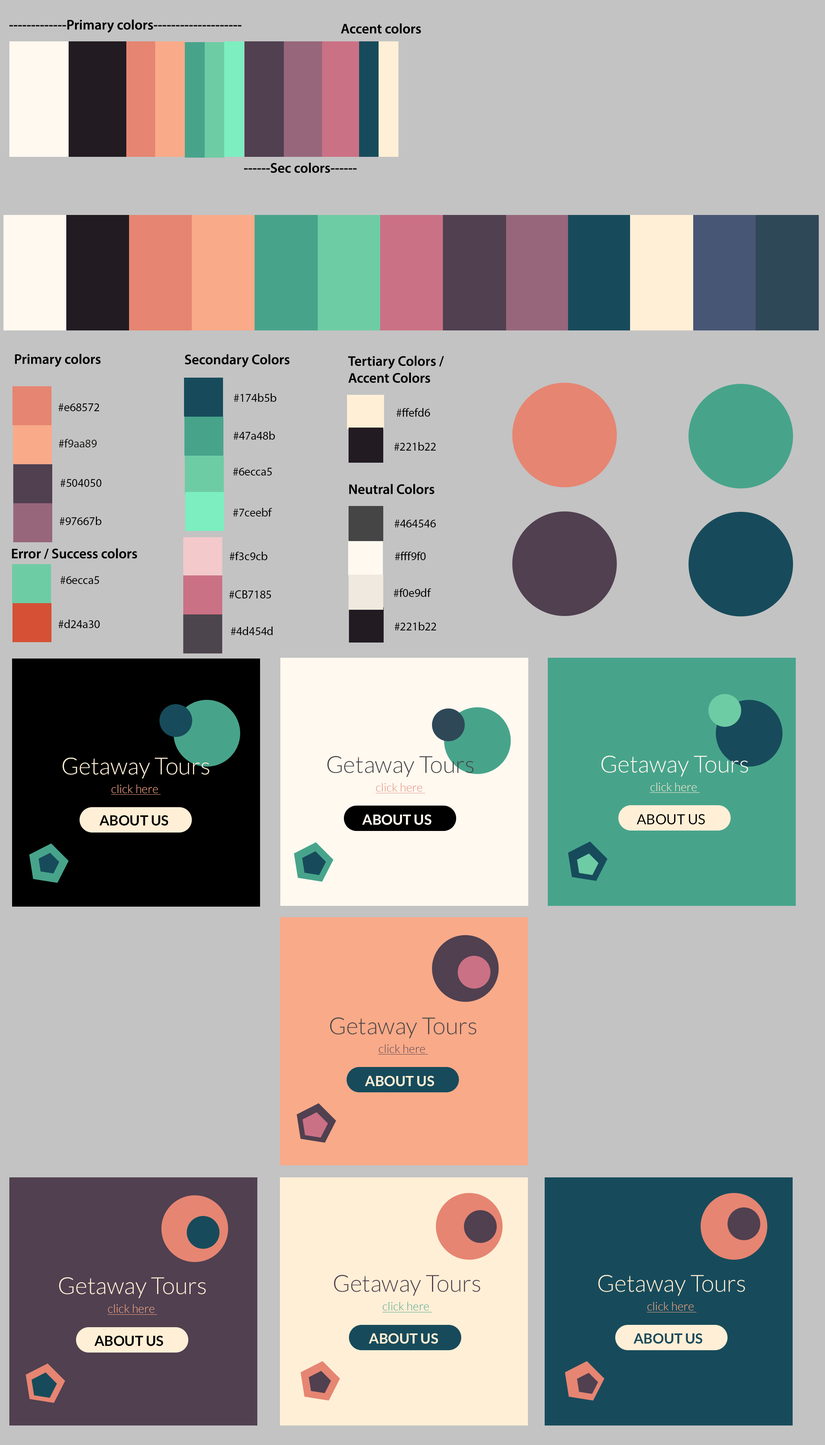
<style>
.page{position:relative;width:825px;height:1445px;background:#c3c3c3}
.page>*{position:absolute;margin:0}
.t1{font:14px "MyriadPro-Semibold";color:#000000}
.t2{font:11.7px "MyriadPro-Regular";color:#000000}
.t3{font:11.7px "MyriadPro-Regular";color:#181716}
.t4{font:11.7px "MyriadPro-Regular";color:#0c0c0a}
.t5{font:23.4px "Lato-Light";color:#ffefd6}
.t6{font:23.4px "Lato-Light";color:#464546}
.t7{font:23.4px "Lato-Light";color:#fff9f0}
.t8{font:11.7px "Lato-Light";color:#f9aa89;text-decoration:underline}
.t9{font:11.7px "Lato-Light";color:#e68572;text-decoration:underline}
.t10{font:11.7px "Lato-Light";color:#ffefd6;text-decoration:underline}
.t11{font:14px "Lato-Bold";color:#000000}
.t12{font:14px "Lato-Bold";color:#fff9f0}
.t13{font:14px "Lato-Regular";color:#000000}
.t14{font:11.7px "Lato-Light";color:#504050;text-decoration:underline}
.t15{font:14px "Lato-Bold";color:#ffefd6}
.t16{font:23.4px "Lato-Light";color:#504050}
.t17{font:11.7px "Lato-Light";color:#47a48b;text-decoration:underline}
.t18{font:14px "Lato-Bold";color:#174b5b}
</style>
<div class="page">
<p class="t1" style="left:9px;top:20px;width:233px;height:13px">-------------Primary colors--------------------</p>
<p class="t1" style="left:341px;top:23px;width:80px;height:11px">Accent colors</p>
<p class="t1" style="left:244px;top:163px;width:113px;height:10px">------Sec colors------</p>
<p class="t1" style="left:15px;top:354px;width:86px;height:13px">Primary colors</p>
<p class="t1" style="left:185px;top:354px;width:105px;height:13px">Secondary Colors</p>
<p class="t1" style="left:348px;top:356px;width:96px;height:27px">Tertiary Colors / <br>Accent Colors</p>
<p class="t2" style="left:234px;top:393px;width:43px;height:9px">#174b5b</p>
<p class="t2" style="left:59px;top:403px;width:40px;height:8px">#e68572</p>
<p class="t2" style="left:397px;top:408px;width:33px;height:9px">#ffefd6</p>
<p class="t2" style="left:234px;top:431px;width:41px;height:9px">#47a48b</p>
<p class="t3" style="left:59px;top:439px;width:38px;height:8px"><span class="t2">#</span>f9aa89</p>
<p class="t2" style="left:394px;top:442px;width:42px;height:9px">#221b22</p>
<p class="t2" style="left:233px;top:468px;width:39px;height:7px">#6ecca5</p>
<p class="t2" style="left:60px;top:479px;width:41px;height:8px">#504050</p>
<p class="t1" style="left:349px;top:484px;width:86px;height:10px">Neutral Colors</p>
<p class="t4" style="left:233px;top:508px;width:39px;height:8px"><span class="t2">#</span>7ceebf</p>
<p class="t2" style="left:60px;top:516px;width:41px;height:9px">#97667b</p>
<p class="t2" style="left:395px;top:520px;width:41px;height:7px">#464546</p>
<p class="t1" style="left:12px;top:548px;width:125px;height:11px">Error / Success colors</p>
<p class="t2" style="left:230px;top:552px;width:38px;height:8px">#f3c9cb</p>
<p class="t2" style="left:395px;top:552px;width:31px;height:8px">#fff9f0</p>
<p class="t2" style="left:60px;top:576px;width:39px;height:8px">#6ecca5</p>
<p class="t2" style="left:229px;top:590px;width:42px;height:8px">#CB7185</p>
<p class="t2" style="left:394px;top:588px;width:37px;height:9px">#f0e9df</p>
<p class="t2" style="left:59px;top:619px;width:41px;height:9px">#d24a30</p>
<p class="t2" style="left:231px;top:626px;width:42px;height:9px">#4d454d</p>
<p class="t2" style="left:395px;top:622px;width:41px;height:8px">#221b22</p>
<p class="t5" style="left:62px;top:757px;width:147px;height:22px">Getaway Tours</p>
<p class="t6" style="left:327px;top:756px;width:147px;height:21px">Getaway Tours</p>
<p class="t7" style="left:601px;top:756px;width:148px;height:21px">Getaway Tours</p>
<p class="t8" style="left:111px;top:784px;width:50px;height:11px">click here</p>
<p class="t9" style="left:376px;top:783px;width:50px;height:10px">click here</p>
<p class="t10" style="left:650px;top:782px;width:50px;height:11px">click here</p>
<p class="t11" style="left:99px;top:815px;width:70px;height:11px">ABOUT US</p>
<p class="t12" style="left:362px;top:814px;width:70px;height:11px">ABOUT US</p>
<p class="t13" style="left:637px;top:814px;width:68px;height:11px">ABOUT US</p>
<p class="t6" style="left:330px;top:1017px;width:147px;height:21px">Getaway Tours</p>
<p class="t14" style="left:378px;top:1044px;width:50px;height:10px">click here</p>
<p class="t15" style="left:365px;top:1075px;width:70px;height:11px">ABOUT US</p>
<p class="t5" style="left:59px;top:1277px;width:147px;height:21px">Getaway Tours</p>
<p class="t16" style="left:334px;top:1275px;width:147px;height:21px">Getaway Tours</p>
<p class="t5" style="left:598px;top:1275px;width:147px;height:21px">Getaway Tours</p>
<p class="t17" style="left:382px;top:1302px;width:50px;height:10px">click here</p>
<p class="t8" style="left:647px;top:1302px;width:50px;height:10px">click here</p>
<p class="t8" style="left:108px;top:1304px;width:49px;height:10px">click here</p>
<p class="t11" style="left:94px;top:1335px;width:69px;height:11px">ABOUT US</p>
<p class="t15" style="left:369px;top:1333px;width:69px;height:11px">ABOUT US</p>
<p class="t18" style="left:634px;top:1333px;width:69px;height:11px">ABOUT US</p>
</div>
